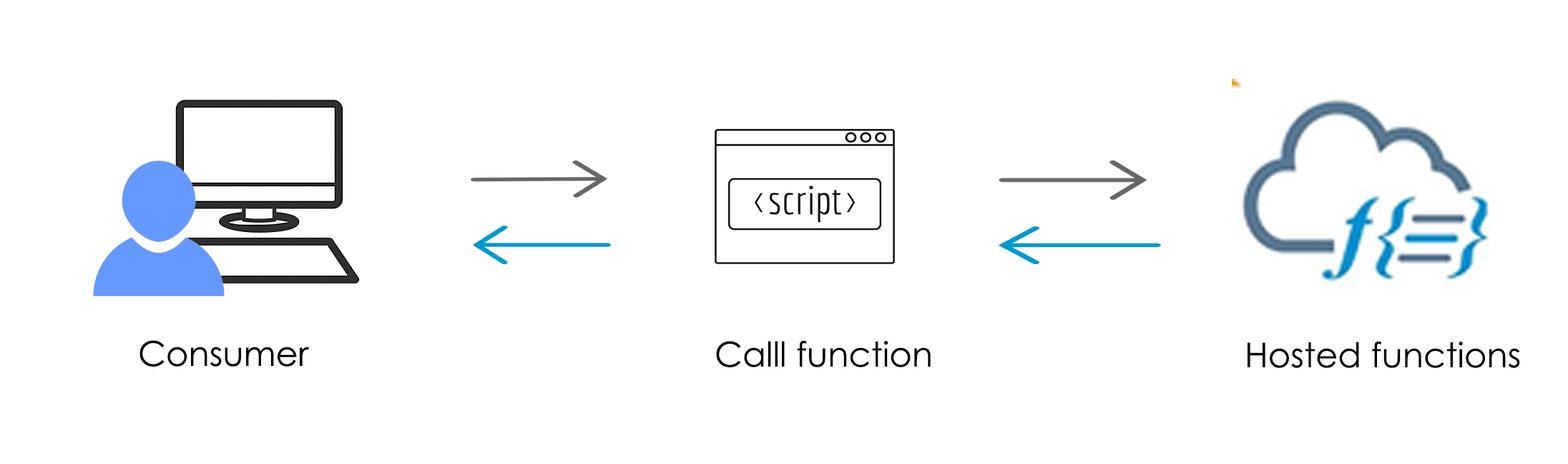
<style>
.page{position:relative;width:1568px;height:464px;background:#ffffff}
.page>*{position:absolute;margin:0}
.t1{font:34.3px "CenturyGothic";color:#000000}
</style>
<div class="page">
<p class="t1" style="left:139px;top:340px;width:171px;height:26px">Consumer</p>
<p class="t1" style="left:716px;top:340px;width:215px;height:27px">Calll function</p>
<p class="t1" style="left:1248px;top:341px;width:272px;height:27px">Hosted functions</p>
</div>
